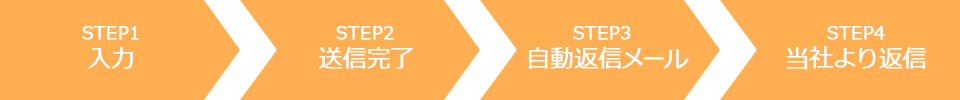
<style>
.page{position:relative;width:960px;height:100px;background:#ffaf51}
.page>*{position:absolute;margin:0}
.t1{font:18px "Meiryo";color:#ffffff;font-weight:bold}
.t2{font:24px "Meiryo";color:#ffffff;font-weight:bold}
</style>
<div class="page">
<p class="t1" style="left:82px;top:26px;width:57px;height:14px">STEP1</p>
<p class="t1" style="left:336px;top:26px;width:58px;height:14px">STEP2</p>
<p class="t1" style="left:573px;top:26px;width:58px;height:14px">STEP3</p>
<p class="t1" style="left:827px;top:26px;width:58px;height:14px">STEP4</p>
<p class="t2" style="left:88px;top:47px;width:45px;height:22px">入力</p>
<p class="t2" style="left:319px;top:47px;width:94px;height:22px">送信完了</p>
<p class="t2" style="left:529px;top:47px;width:160px;height:22px">自動返信メール</p>
<p class="t2" style="left:787px;top:46px;width:140px;height:24px">当社より返信</p>
</div>
